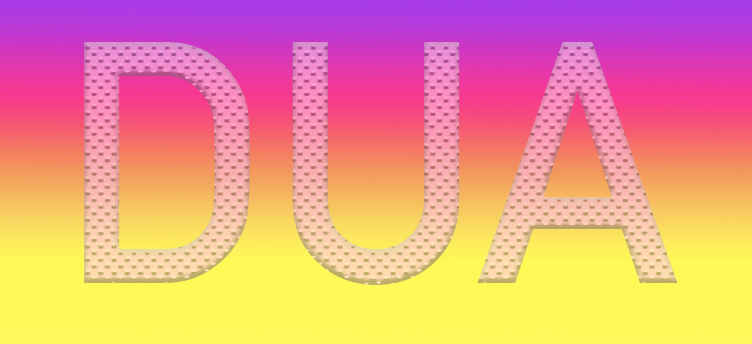
<style>
.page{position:relative;width:752px;height:344px}
.page>*{position:absolute;margin:0}
.t1{font:338.4px "DINAlternate-Bold"}
</style>
<div class="page">
<p class="t1" style="left:84px;top:42px;width:594px;height:243px">DUA</p>
</div>
